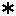
<style>
.page{position:relative;width:16px;height:16px;background:#ffffff}
.page>*{position:absolute;margin:0}
.t1{font:24px "Verdana-Bold";color:#000000}
</style>
<div class="page">
<p class="t1" style="left:2px;top:2px;width:12px;height:12px">*</p>
</div>
